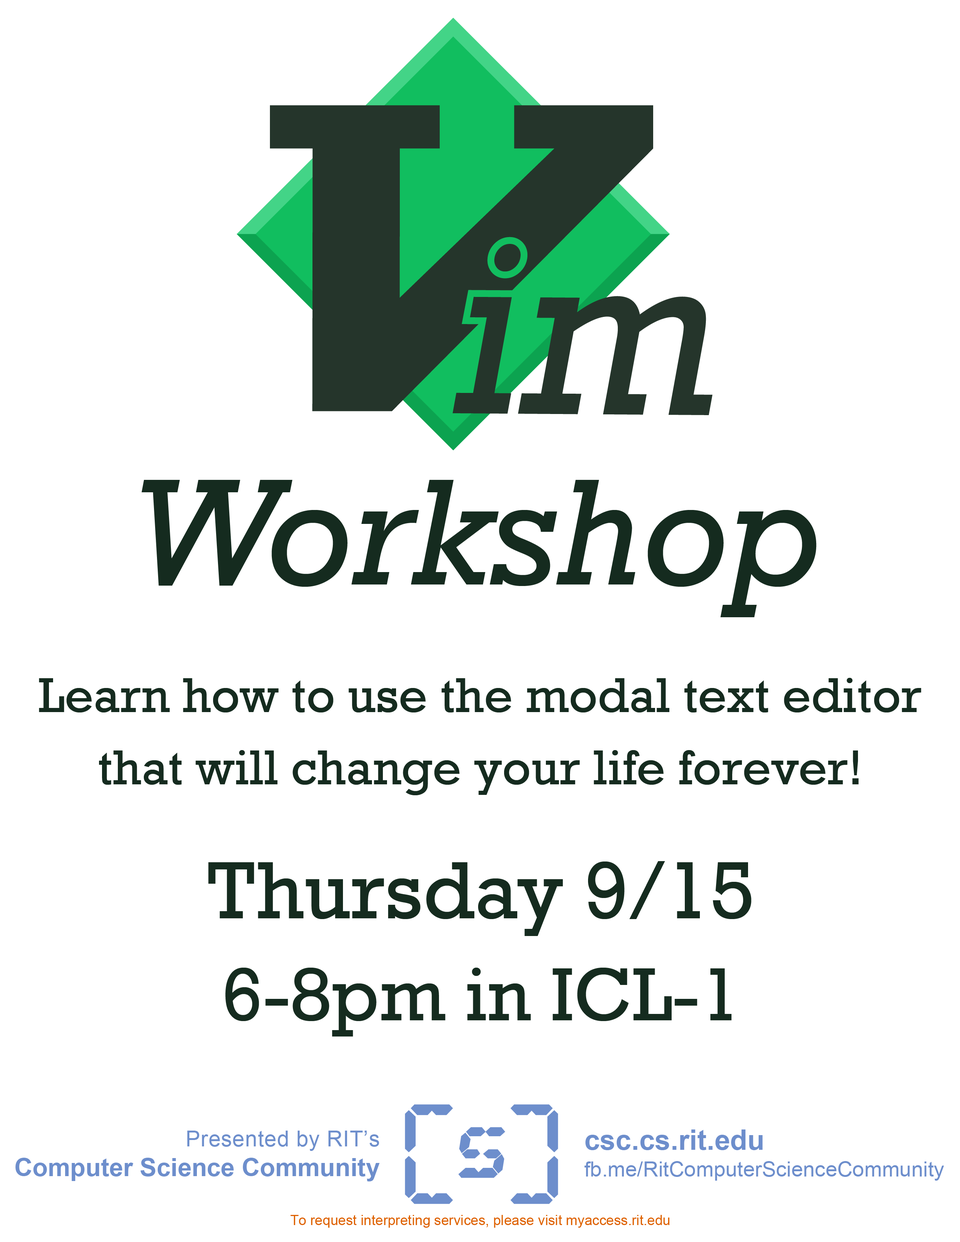
<style>
.page{position:relative;width:960px;height:1242px;background:#ffffff}
.page>*{position:absolute;margin:0}
.t1{font:154.5px "Rockwell-Italic";color:#152b1f}
.t2{font:50.2px/72.4px "Rockwell";color:#152b1f}
.t3{font:76.5px/102px "Rockwell";color:#152b1f}
.t4{font:82.8px/102px "Rockwell";color:#152b1f}
.t5{font:25.1px/29.8px "Arial-BoldMT";color:#6d8ecc}
.t6{font:22px/29.8px "ArialMT";letter-spacing:0.02em;color:#6d8ecc}
.t7{font:21.2px/26.7px "ArialMT";color:#6d8ecc}
.t8{font:28.2px/26.7px "Arial-BoldMT";color:#6d8ecc}
.t9{font:13.9px "ArialMT";color:#de6100}
</style>
<div class="page">
<p class="t1" style="left:142px;top:480px;width:674px;height:137px">Workshop</p>
<p class="t2" style="left:39px;top:678px;width:882px;height:117px;text-align:center">Learn how to use the modal text editor that will change your life forever!</p>
<p class="t3" style="left:208px;top:861px;width:543px;height:176px;text-align:center"><span class="t4">Thursday 9/15<br></span>6-8pm in ICL-1</p>
<p class="t5" style="left:15px;top:1131px;width:365px;height:51px;text-align:right"><span class="t6">Presented by RIT’s<br></span>Computer Science Community</p>
<p class="t7" style="left:584px;top:1130px;width:360px;height:51px"><span class="t8">csc.cs.rit.edu<br></span>fb.me/RitComputerScienceCommunity</p>
<p class="t9" style="left:290px;top:1215px;width:379px;height:13px">To request interpreting services, please visit myaccess.rit.edu</p>
</div>
